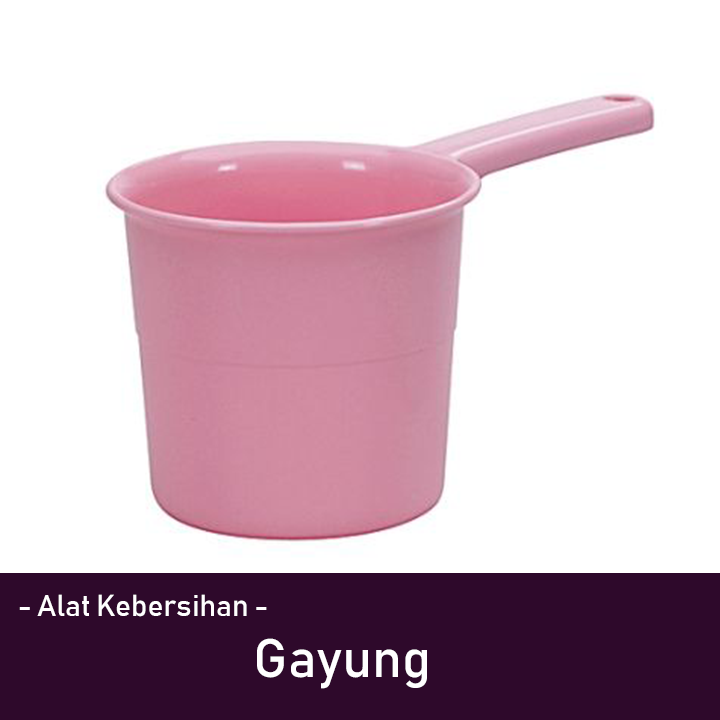
<style>
.page{position:relative;width:720px;height:720px;background:#ffffff}
.page>*{position:absolute;margin:0}
.t1{font:30px "Bahnschrift";color:#ffffff}
.t2{font:53.6px "Bahnschrift";color:#ffffff}
</style>
<div class="page">
<p class="t1" style="left:19px;top:594px;width:248px;height:23px">- Alat Kebersihan -</p>
<p class="t2" style="left:257px;top:638px;width:170px;height:51px">Gayung</p>
</div>
